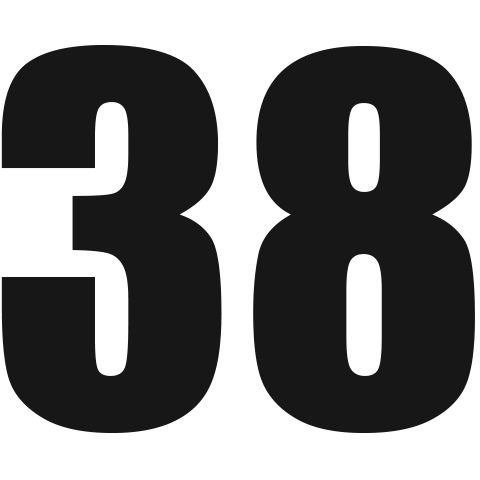
<style>
.page{position:relative;width:480px;height:480px;background:#171717}
.page>*{position:absolute;margin:0}
.t1{font:472.3px "Impact";color:#171717}
</style>
<div class="page">
<p class="t1" style="left:1px;top:45px;width:474px;height:388px">38</p>
</div>
